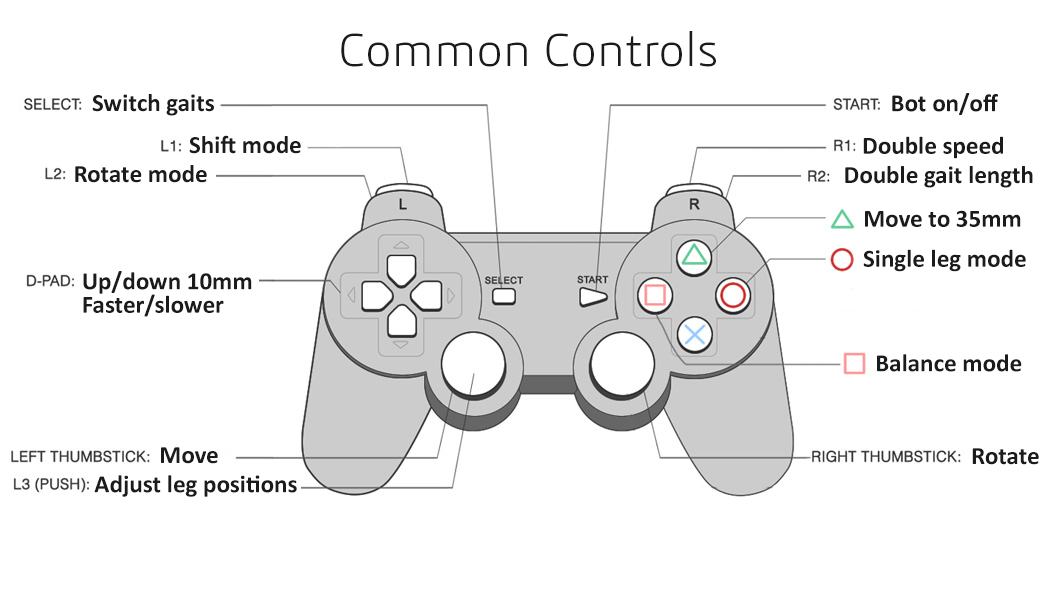
<style>
.page{position:relative;width:1056px;height:594px;background:#ffffff}
.page>*{position:absolute;margin:0}
.t1{font:48px "3ds-Light";color:#1b1b1b}
.t2{font:25px "Calibri-Bold";color:#1b1b1b}
</style>
<div class="page">
<p class="t1" style="left:341px;top:31px;width:375px;height:36px">Common Controls</p>
<p class="t2" style="left:92px;top:94px;width:122px;height:22px">Switch gaits</p>
<p class="t2" style="left:892px;top:93px;width:106px;height:22px">Bot on/off</p>
<p class="t2" style="left:189px;top:135px;width:112px;height:19px">Shift mode</p>
<p class="t2" style="left:863px;top:136px;width:140px;height:23px">Double speed</p>
<p class="t2" style="left:75px;top:165px;width:132px;height:18px">Rotate mode</p>
<p class="t2" style="left:845px;top:166px;width:188px;height:22px">Double gait length</p>
<p class="t2" style="left:865px;top:210px;width:156px;height:17px">Move to 35mm</p>
<p class="t2" style="left:863px;top:249px;width:163px;height:23px">Single leg mode</p>
<p class="t2" style="left:83px;top:271px;width:169px;height:23px">Up/down 10mm</p>
<p class="t2" style="left:83px;top:294px;width:141px;height:23px">Faster/slower</p>
<p class="t2" style="left:877px;top:354px;width:145px;height:18px">Balance mode</p>
<p class="t2" style="left:161px;top:447px;width:57px;height:17px">Move</p>
<p class="t2" style="left:972px;top:448px;width:67px;height:17px">Rotate</p>
<p class="t2" style="left:94px;top:475px;width:203px;height:22px">Adjust leg positions</p>
</div>
